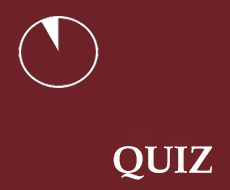
<style>
.page{position:relative;width:230px;height:190px;background:#6e2126}
.page>*{position:absolute;margin:0}
.t1{font:38px "BookAntiqua-Bold";color:#fbf9f9}
</style>
<div class="page">
<p class="t1" style="left:113px;top:146px;width:99px;height:34px">QUIZ</p>
</div>
